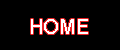
<style>
.page{position:relative;width:120px;height:50px;background:#000000}
.page>*{position:absolute;margin:0}
.t1{font:20px "ArialMT";color:#ffffff}
</style>
<div class="page">
<p class="t1" style="left:31px;top:19px;width:57px;height:15px">HOME</p>
</div>
